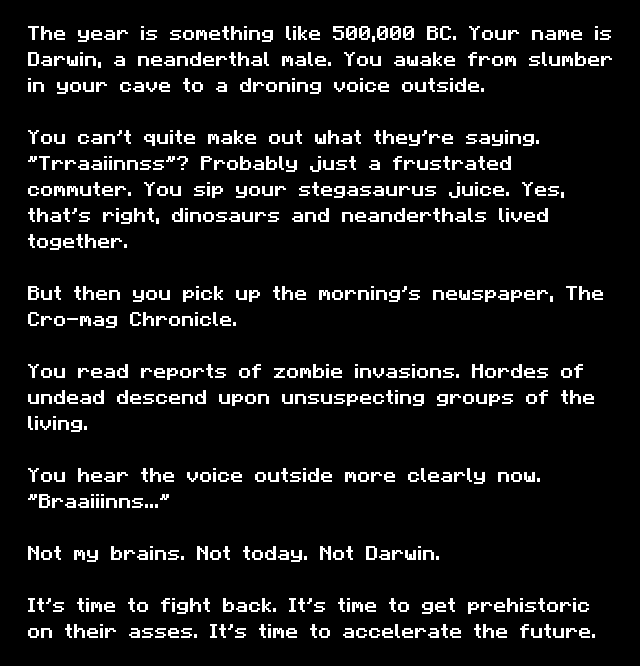
<style>
.page{position:relative;width:640px;height:666px;background:#000000}
.page>*{position:absolute;margin:0}
.t1{font:16px/26px "Minecraftia";color:#ffffff;font-weight:bold}
</style>
<div class="page">
<p class="t1" style="left:28px;top:26px;width:584px;height:612px">The year is something like 500,000 BC. Your name is Darwin, a neanderthal male. You awake from slumber in your cave to a droning voice outside. <br><br>You can’t quite make out what they’re saying. “Trraaiinnss”? Probably just a frustrated commuter. You sip your stegasaurus juice. Yes, that’s right, dinosaurs and neanderthals lived together.<br><br>But then you pick up the morning’s newspaper, The Cro-mag Chronicle.<br><br>You read reports of zombie invasions. Hordes of undead descend upon unsuspecting groups of the living.<br><br>You hear the voice outside more clearly now. “Braaiiinns...”<br><br>Not my brains. Not today. Not Darwin. <br><br>It’s time to fight back. It’s time to get prehistoric on their asses. It’s time to accelerate the future.</p>
</div>
